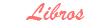
<style>
.page{position:relative;width:108px;height:22px;background:#ffffff}
.page>*{position:absolute;margin:0}
.t1{font:27.4px "BrushScriptMT";color:#ff6d6d}
</style>
<div class="page">
<p class="t1" style="left:26px;top:3px;width:59px;height:18px">Libros</p>
</div>
